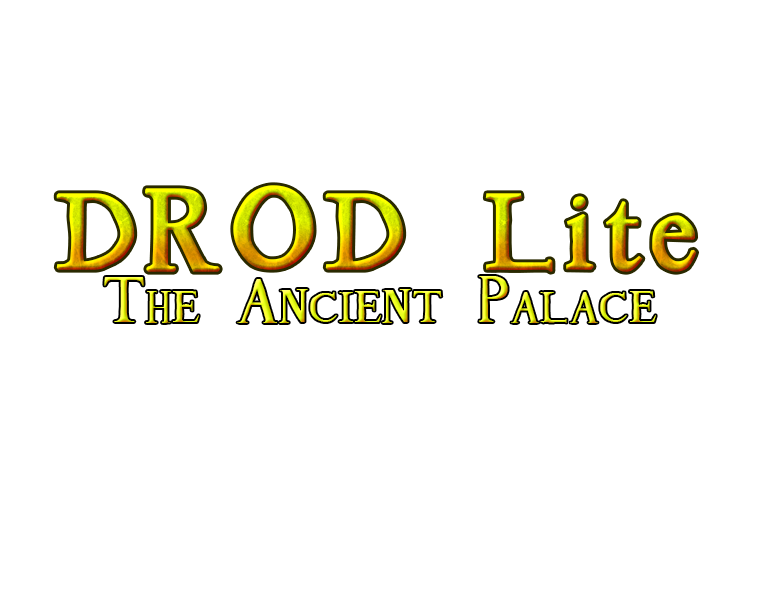
<style>
.page{position:relative;width:760px;height:600px;background:#ffffff}
.page>*{position:absolute;margin:0}
.t1{font:120px "Tom's-NewRoman";letter-spacing:0.06em;font-weight:bold}
.t2{font:70px "Tom's-NewRoman";letter-spacing:0.01em;font-variant:small-caps}
</style>
<div class="page">
<p class="t1" style="left:56px;top:185px;width:641px;height:87px">DROD Lite</p>
<p class="t2" style="left:104px;top:276px;width:552px;height:47px">The Ancient Palace</p>
</div>
